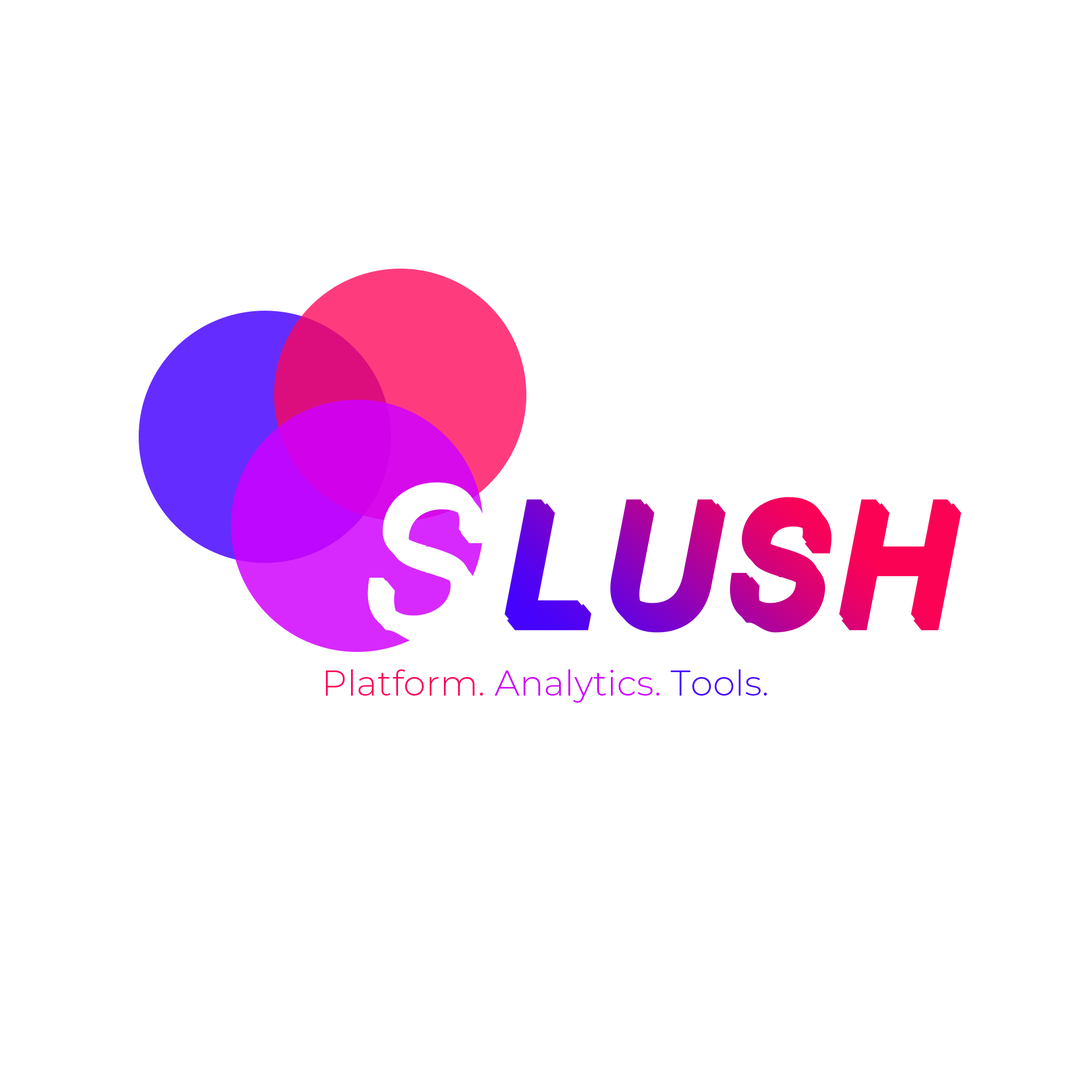
<style>
.page{position:relative;width:1092px;height:1092px;background:#ffffff}
.page>*{position:absolute;margin:0}
.t1{font:264px "Lane-Posh";letter-spacing:0.005em;color:#ffffff;font-variant:small-caps;font-weight:bold;font-style:italic}
.t2{font:147px "Lane-Posh";letter-spacing:0.145em;font-variant:small-caps;font-weight:bold;font-style:italic}
.t3{font:35.5px "Montserrat-Light";letter-spacing:0.005em;color:#cd03fa}
.t4{font:35.5px "Montserrat-Light";letter-spacing:0.005em;color:#fc0457}
.t5{font:35.5px "Montserrat-Light";letter-spacing:0.005em;color:#4805fd}
</style>
<div class="page">
<p class="t1" style="left:367px;top:482px;width:118px;height:161px">s</p>
<p class="t2" style="left:504px;top:497px;width:457px;height:136px">LUSH</p>
<p class="t3" style="left:326px;top:669px;width:441px;height:34px"><span class="t4">Platform. </span>Analytics. <span class="t5">Tools.</span></p>
</div>
